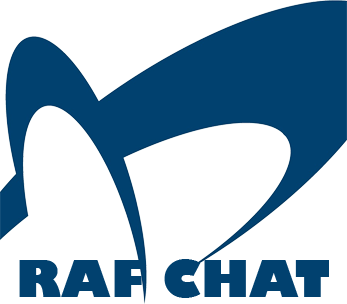
<style>
.page{position:relative;width:347px;height:304px;background:#ffffff}
.page>*{position:absolute;margin:0}
.t1{font:50px "GillSans-UltraBold";color:#01416f}
</style>
<div class="page">
<p class="t1" style="left:19px;top:259px;width:310px;height:39px">RAF CHAT</p>
</div>
